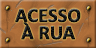
<style>
.page{position:relative;width:96px;height:48px}
.page>*{position:absolute;margin:0}
.t1{font:20px/17.3px "Calibri-Bold";letter-spacing:-0.015em;color:#151515;text-transform:uppercase;font-weight:bold}
</style>
<div class="page">
<p class="t1" style="left:15px;top:8px;width:66px;height:32px;text-align:center">acesso<br>à rua</p>
</div>
